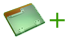
<style>
.page{position:relative;width:70px;height:39px;background:#ffffff}
.page>*{position:absolute;margin:0}
.t1{font:30px "CenturyGothic";color:#339900}
</style>
<div class="page">
<p class="t1" style="left:49px;top:12px;width:16px;height:16px">+</p>
</div>
